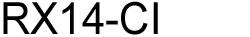
<style>
.page{position:relative;width:250px;height:37px;background:#ffffff}
.page>*{position:absolute;margin:0}
.t1{font:44.4px "ArialMT";color:#000000;scale:0.95 1}
</style>
<div class="page">
<p class="t1" style="left:3px;top:1px;width:155px;height:34px">RX14-CI</p>
</div>
